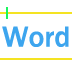
<style>
.page{position:relative;width:72px;height:72px;background:#ffffff}
.page>*{position:absolute;margin:0}
.t1{font:30px "FranklinGothic-Medium";color:#3da5ee}
</style>
<div class="page">
<p class="t1" style="left:2px;top:26px;width:67px;height:21px">Word</p>
</div>
